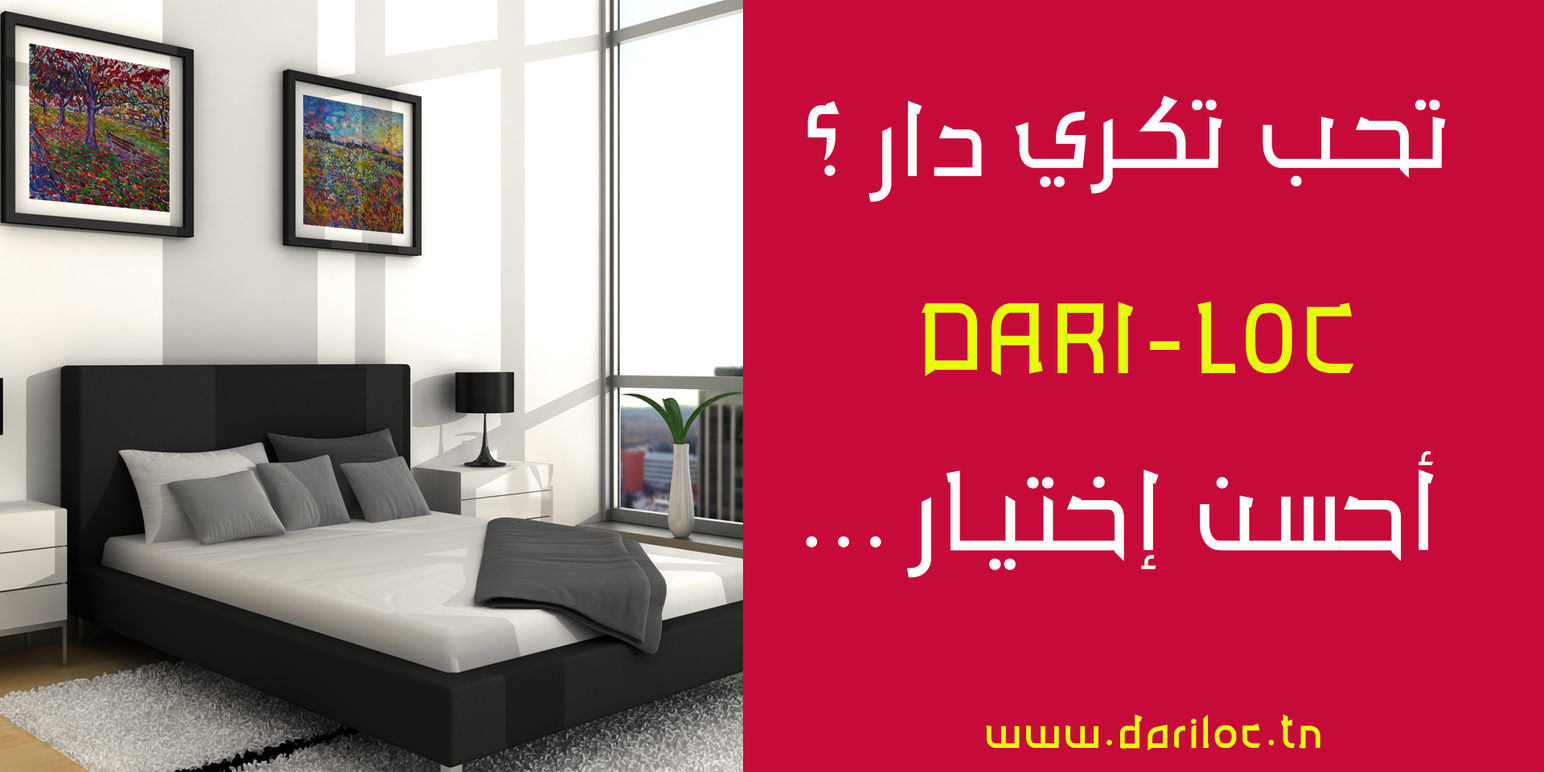
<style>
.page{position:relative;width:1544px;height:772px;background:#c60b3a}
.page>*{position:absolute;margin:0}
.t1{font:93.8px "AD-Rsail";letter-spacing:0.075em;color:#ffffff}
.t2{font:100.5px "AD-Rsail";letter-spacing:0.075em;color:#e5ff09}
.t3{font:100.5px "AD-Rsail";letter-spacing:0.075em;color:#ffffff}
.t4{font:46.9px "AD-Rsail";letter-spacing:0.075em;color:#e5ff09}
</style>
<div class="page">
<p class="t1" style="left:808px;top:101px;width:174px;height:101px">دار ؟</p>
<p class="t1" style="left:1015px;top:96px;width:431px;height:98px">تحب تكري</p>
<p class="t2" style="left:922px;top:302px;width:432px;height:74px">DARI-LOC</p>
<p class="t3" style="left:907px;top:451px;width:527px;height:127px">أحسن إختيار</p>
<p class="t3" style="left:806px;top:536px;width:76px;height:12px">...</p>
<p class="t4" style="left:986px;top:714px;width:335px;height:36px">www.dariloc.tn</p>
</div>
